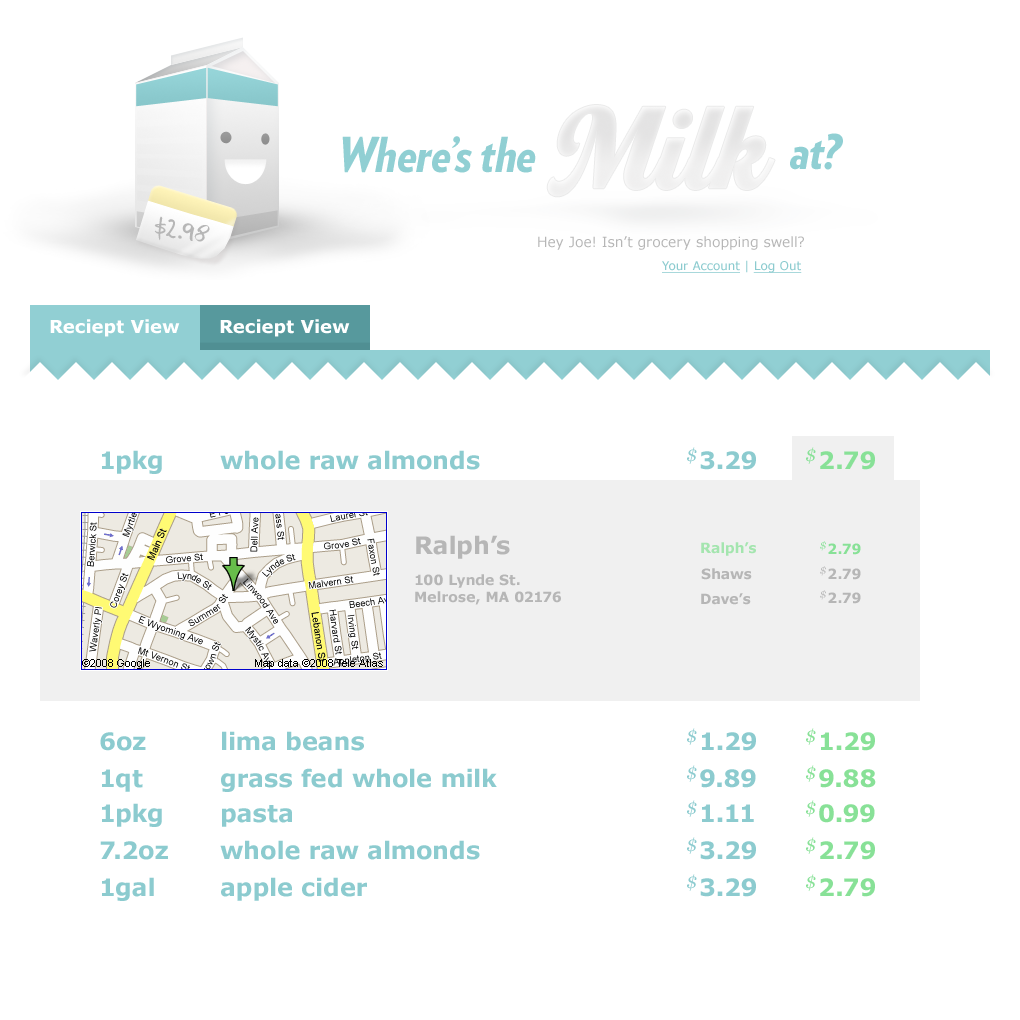
<style>
.page{position:relative;width:1020px;height:1020px;background:#ffffff}
.page>*{position:absolute;margin:0}
.t1{font:14px "Verdana";color:#b6b6b6}
.t2{font:12px "Verdana";color:#8ccbcf;text-decoration:underline}
.t3{font:12px "Verdana";color:#8ccbcf}
.t4{font:18px "Verdana-Bold";color:#ffffff}
.t5{font:24px "Verdana-Bold";color:#8ccbcf}
.t6{font:18px "Georgia-Italic";color:#8ccbcf}
.t7{font:24px "Verdana-Bold";color:#88e197}
.t8{font:18px "Georgia-Italic";color:#88e197}
.t9{font:24px "Verdana-Bold";color:#b6b6b6}
.t10{font:14px "Verdana-Bold";color:#a4e5af}
.t11{font:14.1px "Verdana-Bold";color:#88e197}
.t12{font:10.6px "Georgia-Italic";color:#88e197}
.t13{font:14px "Verdana-Bold";color:#b6b6b6}
.t14{font:14.1px "Verdana-Bold";color:#b6b6b6}
.t15{font:10.6px "Georgia-Italic";color:#b6b6b6}
.t16{font:14px/16.5px "Verdana-Bold";color:#b6b6b6}
</style>
<div class="page">
<p class="t1" style="left:538px;top:236px;width:266px;height:14px">Hey Joe! Isn’t grocery shopping swell?</p>
<p class="t2" style="left:662px;top:260px;width:140px;height:13px">Your Account<span class="t3"> | </span>Log Out</p>
<p class="t4" style="left:50px;top:319px;width:130px;height:18px">Reciept View</p>
<p class="t4" style="left:220px;top:319px;width:130px;height:18px">Reciept View</p>
<p class="t5" style="left:687px;top:447px;width:69px;height:23px"><span class="t6">$</span>3.29</p>
<p class="t7" style="left:806px;top:447px;width:69px;height:23px"><span class="t8">$</span>2.79</p>
<p class="t5" style="left:102px;top:450px;width:60px;height:24px">1pkg</p>
<p class="t5" style="left:220px;top:450px;width:260px;height:20px">whole raw almonds</p>
<p class="t9" style="left:416px;top:535px;width:94px;height:24px">Ralph’s</p>
<p class="t10" style="left:701px;top:542px;width:55px;height:14px">Ralph’s</p>
<p class="t11" style="left:820px;top:541px;width:41px;height:14px"><span class="t12">$</span>2.79</p>
<p class="t13" style="left:701px;top:568px;width:51px;height:12px">Shaws</p>
<p class="t14" style="left:820px;top:566px;width:41px;height:14px"><span class="t15">$</span>2.79</p>
<p class="t16" style="left:415px;top:574px;width:146px;height:31px">100 Lynde St.<br>Melrose, MA 02176</p>
<p class="t13" style="left:701px;top:593px;width:50px;height:12px">Dave’s</p>
<p class="t14" style="left:820px;top:590px;width:41px;height:14px"><span class="t15">$</span>2.79</p>
<p class="t5" style="left:100px;top:732px;width:46px;height:19px">6oz</p>
<p class="t5" style="left:222px;top:731px;width:142px;height:20px">lima beans</p>
<p class="t5" style="left:687px;top:728px;width:69px;height:23px"><span class="t6">$</span>1.29</p>
<p class="t7" style="left:806px;top:728px;width:69px;height:23px"><span class="t8">$</span>1.29</p>
<p class="t5" style="left:102px;top:769px;width:41px;height:23px">1qt</p>
<p class="t5" style="left:221px;top:768px;width:276px;height:24px">grass fed whole milk</p>
<p class="t5" style="left:687px;top:765px;width:69px;height:23px"><span class="t6">$</span>9.89</p>
<p class="t7" style="left:806px;top:765px;width:70px;height:23px"><span class="t8">$</span>9.88</p>
<p class="t5" style="left:102px;top:803px;width:60px;height:24px">1pkg</p>
<p class="t5" style="left:222px;top:805px;width:70px;height:22px">pasta</p>
<p class="t5" style="left:687px;top:800px;width:67px;height:22px"><span class="t6">$</span>1.11</p>
<p class="t7" style="left:806px;top:800px;width:69px;height:23px"><span class="t8">$</span>0.99</p>
<p class="t5" style="left:100px;top:841px;width:68px;height:19px">7.2oz</p>
<p class="t5" style="left:220px;top:840px;width:260px;height:20px">whole raw almonds</p>
<p class="t5" style="left:687px;top:837px;width:69px;height:23px"><span class="t6">$</span>3.29</p>
<p class="t7" style="left:806px;top:837px;width:69px;height:23px"><span class="t8">$</span>2.79</p>
<p class="t5" style="left:102px;top:877px;width:52px;height:24px">1gal</p>
<p class="t5" style="left:221px;top:877px;width:146px;height:24px">apple cider</p>
<p class="t5" style="left:687px;top:874px;width:69px;height:23px"><span class="t6">$</span>3.29</p>
<p class="t7" style="left:806px;top:874px;width:69px;height:23px"><span class="t8">$</span>2.79</p>
</div>
